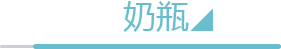
<style>
.page{position:relative;width:281px;height:49px;background:#ffffff}
.page>*{position:absolute;margin:0}
.t1{font:33px "MicrosoftYaHei";color:#69becd}
</style>
<div class="page">
<p class="t1" style="left:123px;top:1px;width:66px;height:31px">奶瓶</p>
</div>
